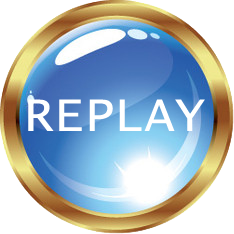
<style>
.page{position:relative;width:234px;height:234px;background:#ffffff}
.page>*{position:absolute;margin:0}
.t1{font:50px "LucidaConsole";color:#ffffff}
</style>
<div class="page">
<p class="t1" style="left:28px;top:99px;width:177px;height:32px">REPLAY</p>
</div>
